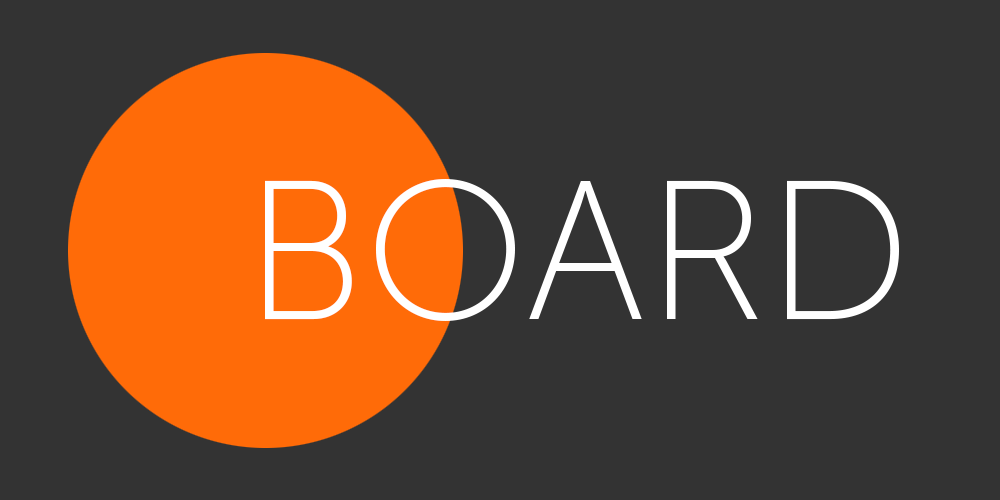
<style>
.page{position:relative;width:1000px;height:500px;background:#333333}
.page>*{position:absolute;margin:0}
.t1{font:197px "MuseoSansCyrl-100";color:#ffffff}
</style>
<div class="page">
<p class="t1" style="left:265px;top:179px;width:634px;height:142px">BOARD</p>
</div>
